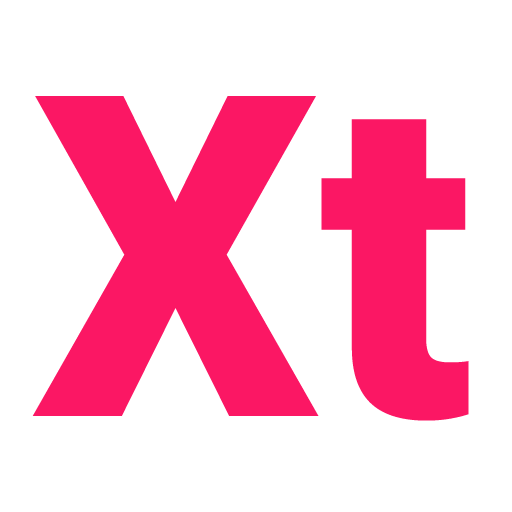
<style>
.page{position:relative;width:512px;height:512px;background:#ffffff}
.page>*{position:absolute;margin:0}
.t1{font:450px "Roboto-Black";color:#fb1764}
</style>
<div class="page">
<p class="t1" style="left:32px;top:96px;width:437px;height:325px">Xt</p>
</div>
